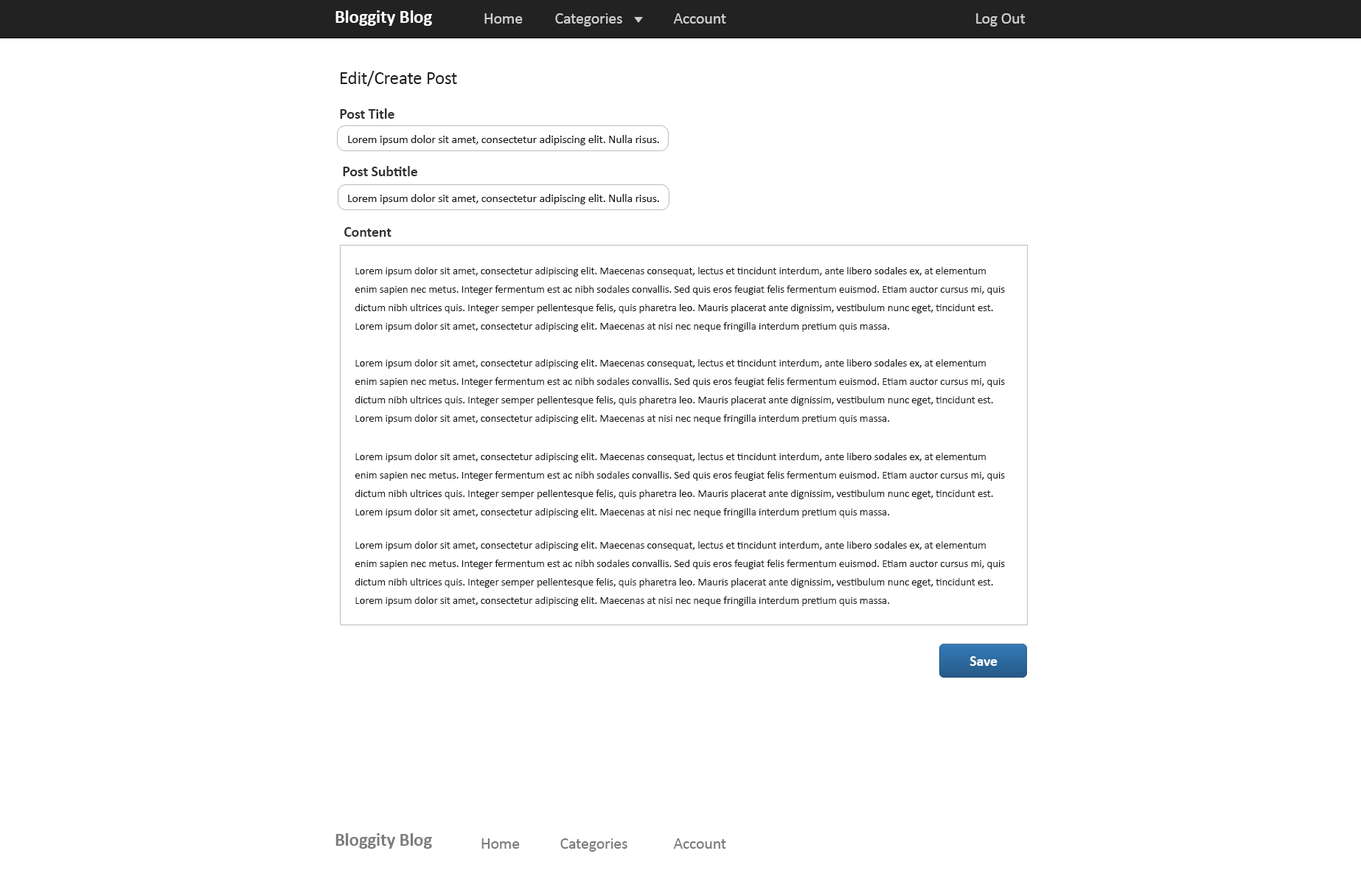
<style>
.page{position:relative;width:1361px;height:876px;background:#ffffff}
.page>*{position:absolute;margin:0}
.t1{font:18.4px "Calibri-Bold";letter-spacing:-0.01em;color:#ffffff}
.t2{font:16.2px "Calibri";letter-spacing:-0.01em;color:#cccccc}
.t3{font:18.4px "Calibri";letter-spacing:-0.01em;color:#1c1c1c}
.t4{font:14.7px "Calibri-Bold";letter-spacing:-0.01em;color:#323232}
.t5{font:11.8px "Calibri";letter-spacing:-0.01em;color:#1c1c1c}
.t6{font:11.1px/18.4px "Calibri";letter-spacing:-0.01em;color:#1c1c1c}
.t7{font:14.7px "Calibri-Bold";letter-spacing:-0.01em;color:#ffffff}
.t8{font:18.4px "Calibri-Bold";letter-spacing:-0.01em;color:#7d7c7c}
.t9{font:16.2px "Calibri";letter-spacing:-0.01em;color:#7d7c7c}
</style>
<div class="page">
<p class="t1" style="left:336px;top:10px;width:96px;height:16px">Bloggity Blog</p>
<p class="t2" style="left:484px;top:13px;width:39px;height:11px">Home</p>
<p class="t2" style="left:555px;top:13px;width:67px;height:14px">Categories</p>
<p class="t2" style="left:673px;top:13px;width:53px;height:11px">Account</p>
<p class="t2" style="left:976px;top:13px;width:50px;height:14px">Log Out</p>
<p class="t3" style="left:341px;top:71px;width:116px;height:15px">Edit/Create Post</p>
<p class="t4" style="left:340px;top:108px;width:54px;height:11px">Post Title</p>
<p class="t5" style="left:348px;top:135px;width:311px;height:10px">Lorem ipsum dolor sit amet, consectetur adipiscing elit. Nulla risus.</p>
<p class="t4" style="left:343px;top:166px;width:74px;height:10px">Post Subtitle</p>
<p class="t5" style="left:348px;top:194px;width:311px;height:10px">Lorem ipsum dolor sit amet, consectetur adipiscing elit. Nulla risus.</p>
<p class="t4" style="left:344px;top:227px;width:48px;height:10px">Content</p>
<p class="t6" style="left:355px;top:267px;width:650px;height:65px">Lorem ipsum dolor sit amet, consectetur adipiscing elit. Maecenas consequat, lectus et tincidunt interdum, ante libero sodales ex, at elementum enim sapien nec metus. Integer fermentum est ac nibh sodales convallis. Sed quis eros feugiat felis fermentum euismod. Etiam auctor cursus mi, quis dictum nibh ultrices quis. Integer semper pellentesque felis, quis pharetra leo. Mauris placerat ante dignissim, vestibulum nunc eget, tincidunt est. Lorem ipsum dolor sit amet, consectetur adipiscing elit. Maecenas at nisi nec neque fringilla interdum pretium quis massa.</p>
<p class="t6" style="left:355px;top:359px;width:650px;height:65px">Lorem ipsum dolor sit amet, consectetur adipiscing elit. Maecenas consequat, lectus et tincidunt interdum, ante libero sodales ex, at elementum enim sapien nec metus. Integer fermentum est ac nibh sodales convallis. Sed quis eros feugiat felis fermentum euismod. Etiam auctor cursus mi, quis dictum nibh ultrices quis. Integer semper pellentesque felis, quis pharetra leo. Mauris placerat ante dignissim, vestibulum nunc eget, tincidunt est. Lorem ipsum dolor sit amet, consectetur adipiscing elit. Maecenas at nisi nec neque fringilla interdum pretium quis massa.</p>
<p class="t6" style="left:355px;top:453px;width:650px;height:65px">Lorem ipsum dolor sit amet, consectetur adipiscing elit. Maecenas consequat, lectus et tincidunt interdum, ante libero sodales ex, at elementum enim sapien nec metus. Integer fermentum est ac nibh sodales convallis. Sed quis eros feugiat felis fermentum euismod. Etiam auctor cursus mi, quis dictum nibh ultrices quis. Integer semper pellentesque felis, quis pharetra leo. Mauris placerat ante dignissim, vestibulum nunc eget, tincidunt est. Lorem ipsum dolor sit amet, consectetur adipiscing elit. Maecenas at nisi nec neque fringilla interdum pretium quis massa.</p>
<p class="t6" style="left:355px;top:541px;width:650px;height:65px">Lorem ipsum dolor sit amet, consectetur adipiscing elit. Maecenas consequat, lectus et tincidunt interdum, ante libero sodales ex, at elementum enim sapien nec metus. Integer fermentum est ac nibh sodales convallis. Sed quis eros feugiat felis fermentum euismod. Etiam auctor cursus mi, quis dictum nibh ultrices quis. Integer semper pellentesque felis, quis pharetra leo. Mauris placerat ante dignissim, vestibulum nunc eget, tincidunt est. Lorem ipsum dolor sit amet, consectetur adipiscing elit. Maecenas at nisi nec neque fringilla interdum pretium quis massa.</p>
<p class="t7" style="left:970px;top:656px;width:28px;height:10px">Save</p>
<p class="t8" style="left:336px;top:833px;width:96px;height:16px">Bloggity Blog</p>
<p class="t9" style="left:482px;top:838px;width:38px;height:11px">Home</p>
<p class="t9" style="left:560px;top:838px;width:68px;height:14px">Categories</p>
<p class="t9" style="left:673px;top:838px;width:53px;height:11px">Account</p>
</div>
